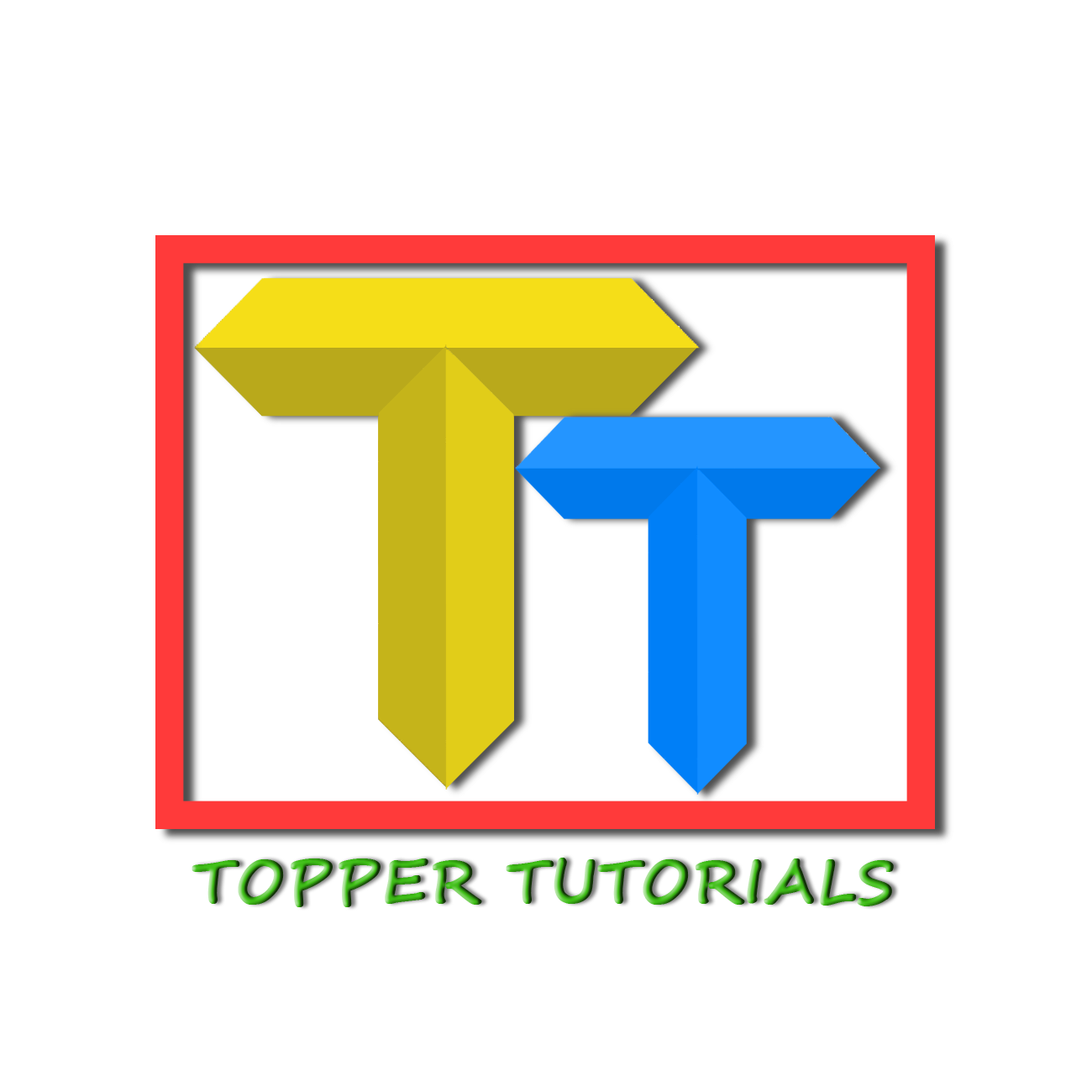
<style>
.page{position:relative;width:1092px;height:1092px;background:#ffffff}
.page>*{position:absolute;margin:0}
.t1{font:59.5px "SegoeScript-Bold";text-transform:uppercase;font-weight:bold}
</style>
<div class="page">
<p class="t1" style="left:192px;top:858px;width:702px;height:49px">Topper Tutorials</p>
</div>
